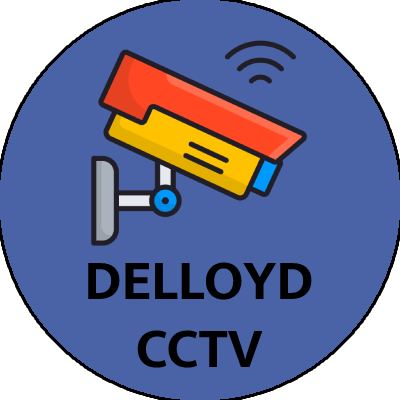
<style>
.page{position:relative;width:400px;height:400px;background:#4a63a6}
.page>*{position:absolute;margin:0}
.t1{font:57px "Mukta-Bold";color:#000000}
</style>
<div class="page">
<p class="t1" style="left:88px;top:262px;width:224px;height:106px;text-align:center">DELLOYD<br>CCTV</p>
</div>
